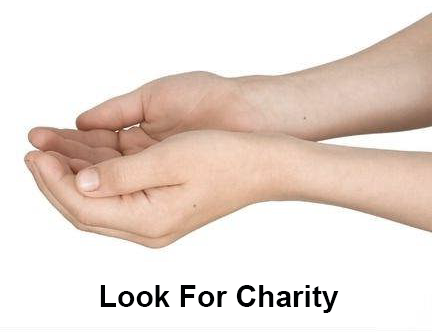
<style>
.page{position:relative;width:432px;height:332px;background:#ffffff}
.page>*{position:absolute;margin:0}
.t1{font:30px "Arial-BoldMT";color:#000203}
</style>
<div class="page">
<p class="t1" style="left:100px;top:285px;width:239px;height:28px">Look For Charity</p>
</div>
